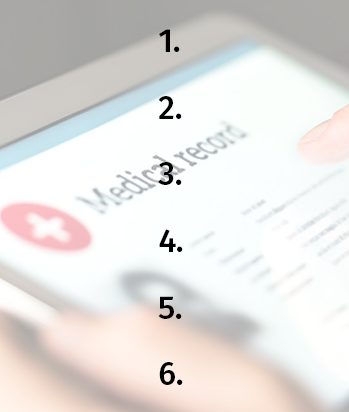
<style>
.page{position:relative;width:349px;height:412px}
.page>*{position:absolute;margin:0}
.t1{font:33.3px/66.7px "FiraSans-Medium";color:#000000}
</style>
<div class="page">
<p class="t1" style="left:158px;top:29px;width:25px;height:356px">1.<br>2.<br>3.<br>4.<br>5.<br>6.</p>
</div>
